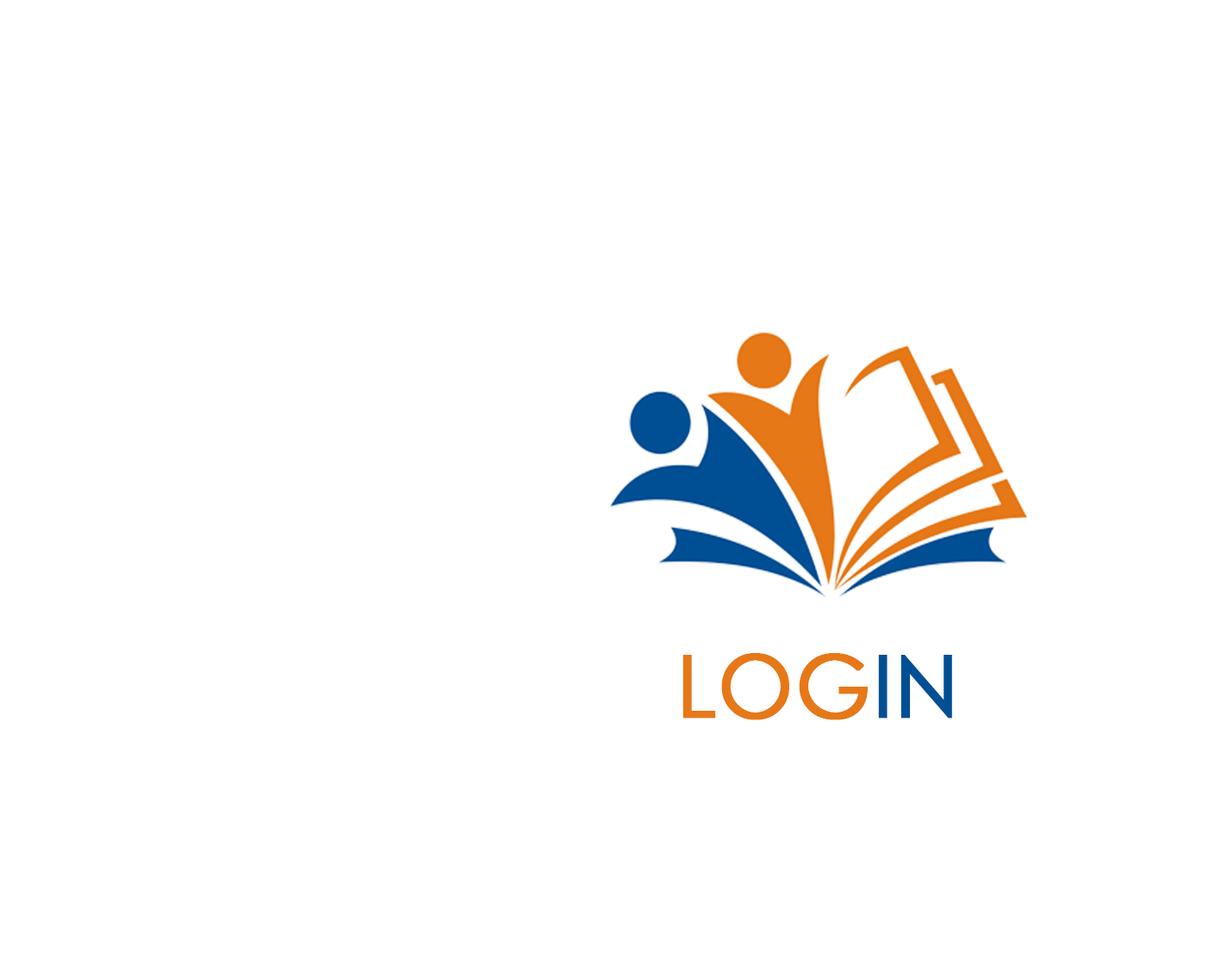
<style>
.page{position:relative;width:1221px;height:977px;background:#ffffff}
.page>*{position:absolute;margin:0}
.t1{font:86.1px "CenturyGothic";color:#e67817;font-variant:small-caps;font-weight:bold}
.t2{font:86.1px "CenturyGothic";color:#004f94;font-variant:small-caps;font-weight:bold}
</style>
<div class="page">
<p class="t1" style="left:682px;top:653px;width:270px;height:67px">LOG<span class="t2">IN</span></p>
</div>
